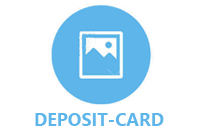
<style>
.page{position:relative;width:205px;height:138px;background:#ffffff}
.page>*{position:absolute;margin:0}
.t1{font:18px "NirmalaUI-Bold";color:#5eb5ea}
</style>
<div class="page">
<p class="t1" style="left:35px;top:113px;width:129px;height:13px">DEPOSIT-CARD</p>
</div>
